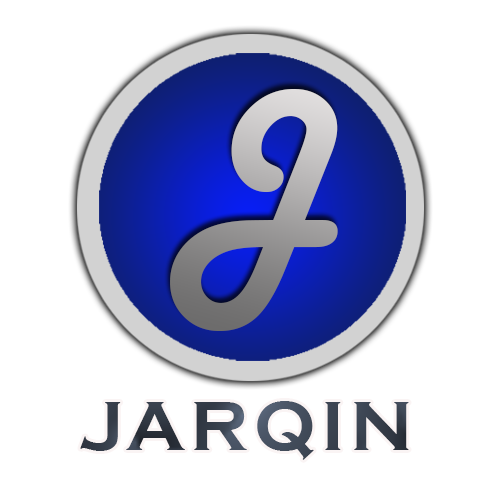
<style>
.page{position:relative;width:500px;height:500px;background:#ffffff}
.page>*{position:absolute;margin:0}
.t1{font:233.3px "HarlowSolid"}
.t2{font:72px "CopperplateGothic-Bold";letter-spacing:0.075em;color:#3a424f}
</style>
<div class="page">
<p class="t1" style="left:170px;top:88px;width:168px;height:243px">J</p>
<p class="t2" style="left:80px;top:401px;width:329px;height:59px">JARQIN</p>
</div>
